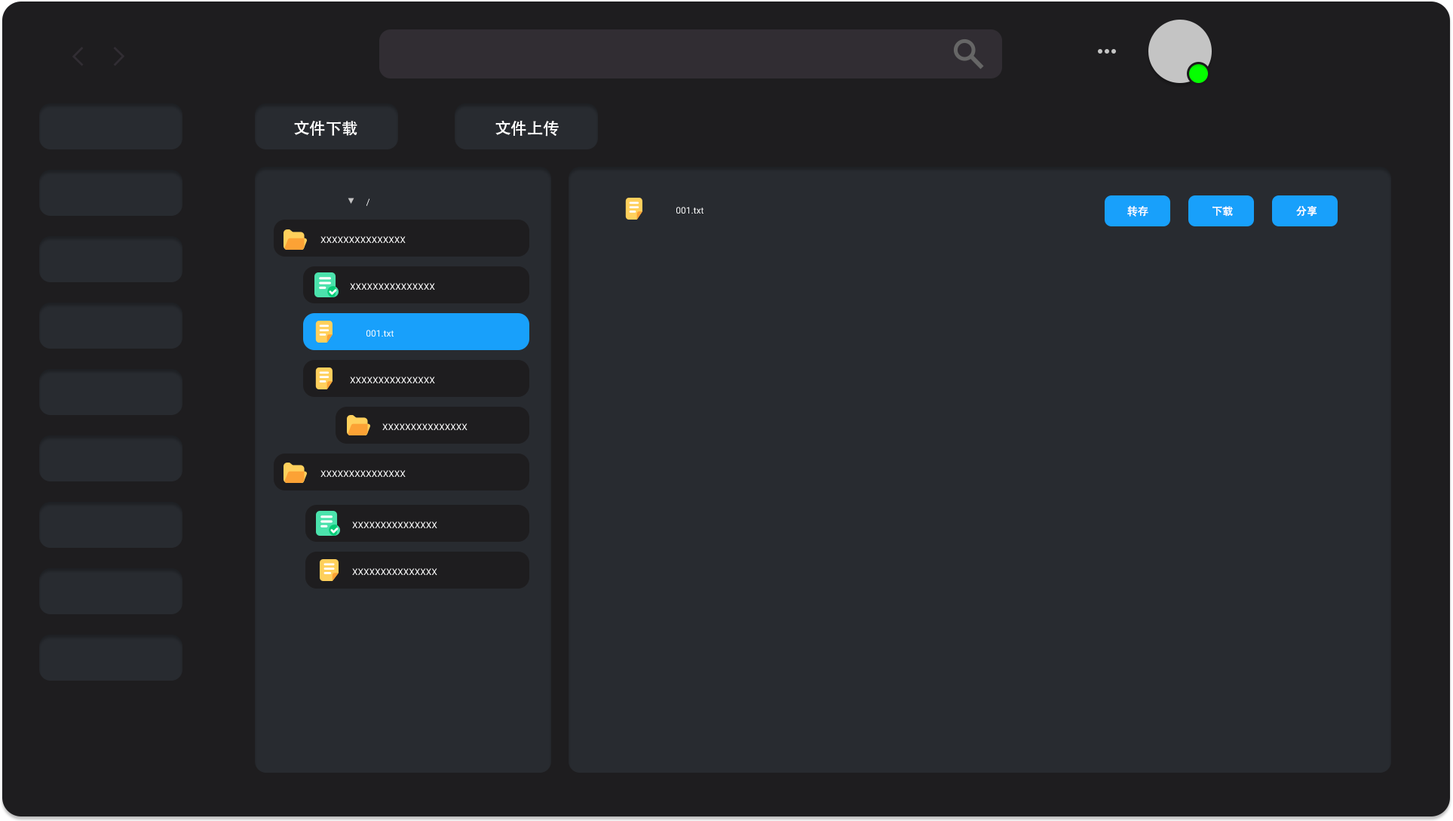
<style>
.page{position:relative;width:1453px;height:821px;background:#282b30}
.page>*{position:absolute;margin:0}
.t1{font:16.1px "AdobeHeitiStd-Regular";color:#ffffff}
.t2{font:9px "Roboto-Regular"}
.t3{font:9px "Roboto-Regular";color:#ffffff}
.t4{font:10.7px "AdobeHeitiStd-Regular";color:#ffffff}
</style>
<div class="page">
<p class="t1" style="left:294px;top:121px;width:63px;height:15px">文件下载</p>
<p class="t1" style="left:495px;top:121px;width:64px;height:16px">文件上传</p>
<p class="t2" style="left:366px;top:198px;width:4px;height:8px">个人/企业</p>
<p class="t3" style="left:676px;top:207px;width:28px;height:7px">测试文档001.txt</p>
<p class="t4" style="left:1127px;top:205px;width:22px;height:11px">转存</p>
<p class="t4" style="left:1213px;top:206px;width:20px;height:10px">下载</p>
<p class="t4" style="left:1296px;top:206px;width:22px;height:10px">分享</p>
<p class="t3" style="left:321px;top:236px;width:85px;height:7px">XXXXXXXXXXXXXXX</p>
<p class="t3" style="left:350px;top:283px;width:85px;height:7px">XXXXXXXXXXXXXXX</p>
<p class="t3" style="left:366px;top:330px;width:28px;height:7px">测试文档001.txt</p>
<p class="t3" style="left:350px;top:376px;width:85px;height:7px">XXXXXXXXXXXXXXX</p>
<p class="t3" style="left:382px;top:423px;width:86px;height:7px">XXXXXXXXXXXXXXX</p>
<p class="t3" style="left:321px;top:470px;width:85px;height:7px">XXXXXXXXXXXXXXX</p>
<p class="t3" style="left:352px;top:521px;width:85px;height:7px">XXXXXXXXXXXXXXX</p>
<p class="t3" style="left:352px;top:568px;width:85px;height:7px">XXXXXXXXXXXXXXX</p>
</div>
